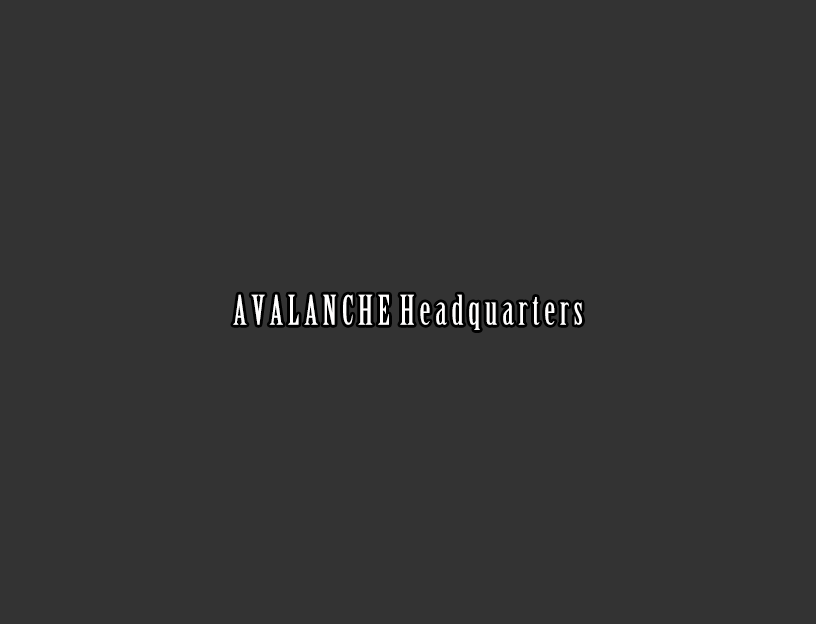
<style>
.page{position:relative;width:816px;height:624px;background:#333333}
.page>*{position:absolute;margin:0}
.t1{font:40px "BirchStd";color:#fffefe}
</style>
<div class="page">
<p class="t1" style="left:233px;top:294px;width:349px;height:36px">A V A L A N C H E  H e a d q u a r t e r s</p>
</div>
